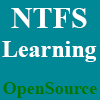
<style>
.page{position:relative;width:100px;height:100px;background:#008896}
.page>*{position:absolute;margin:0}
.t1{font:24px "TimesNewRomanPS-BoldMT";color:#ffffff}
.t2{font:30px "TimesNewRomanPS-BoldMT";color:#ffffff}
.t3{font:18px "TimesNewRomanPS-BoldMT";color:#037600}
</style>
<div class="page">
<p class="t1" style="left:2px;top:8px;width:95px;height:54px;text-align:center"><span class="t2">NTFS<br></span>Learning</p>
<p class="t3" style="left:3px;top:82px;width:94px;height:16px">OpenSource</p>
</div>
